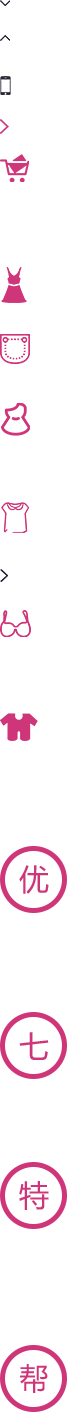
<style>
.page{position:relative;width:67px;height:1412px;background:#ffffff}
.page>*{position:absolute;margin:0}
.t1{font:30px "MicrosoftYaHei";color:#cf367a;text-transform:uppercase}
</style>
<div class="page">
<p class="t1" style="left:19px;top:865px;width:30px;height:29px">优</p>
<p class="t1" style="left:19px;top:1032px;width:30px;height:28px">七</p>
<p class="t1" style="left:19px;top:1181px;width:30px;height:29px">特</p>
<p class="t1" style="left:20px;top:1364px;width:28px;height:29px">帮</p>
</div>
